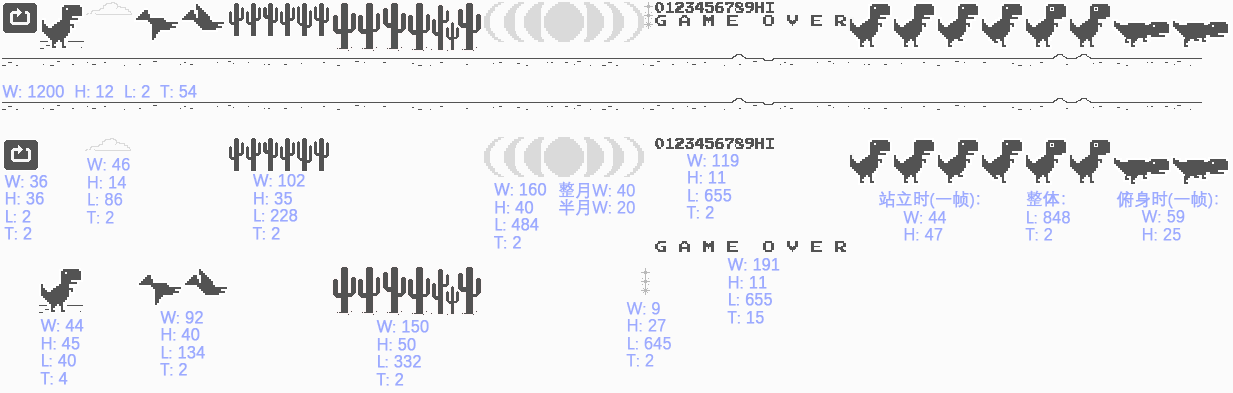
<style>
.page{position:relative;width:1233px;height:393px;background:#fbfbfb}
.page>*{position:absolute;margin:0}
.t1{font:16.7px "DengXian-Regular";color:#9caaff;font-weight:bold}
.t2{font:16.7px/17.5px "DengXian-Regular";color:#9caaff;font-weight:bold}
</style>
<div class="page">
<p class="t1" style="left:2px;top:85px;width:195px;height:13px">W: 1200  H: 12  L: 2  T: 54</p>
<p class="t2" style="left:86px;top:158px;width:44px;height:66px">W: 46<br>H: 14<br>L: 86<br>T: 2</p>
<p class="t2" style="left:686px;top:154px;width:53px;height:65px">W: 119<br>H: 11<br>L: 655<br>T: 2</p>
<p class="t2" style="left:252px;top:174px;width:53px;height:66px">W: 102<br>H: 35<br>L: 228<br>T: 2</p>
<p class="t2" style="left:4px;top:175px;width:44px;height:65px">W: 36<br>H: 36<br>L: 2<br>T: 2</p>
<p class="t2" style="left:494px;top:183px;width:53px;height:66px">W: 160<br>H: 40<br>L: 484<br>T: 2</p>
<p class="t2" style="left:559px;top:181px;width:76px;height:35px">整月W: 40<br>半月W: 20</p>
<p class="t2" style="left:879px;top:191px;width:101px;height:50px">站立时(一帧)：<br>     W: 44<br>     H: 47</p>
<p class="t2" style="left:1025px;top:190px;width:45px;height:51px">整体：<br>L: 848<br>T: 2</p>
<p class="t2" style="left:1116px;top:191px;width:102px;height:50px">俯身时(一帧)：<br>     W: 59<br>     H: 25</p>
<p class="t2" style="left:727px;top:258px;width:53px;height:66px">W: 191<br>H: 11<br>L: 655<br>T: 15</p>
<p class="t2" style="left:626px;top:302px;width:45px;height:65px">W: 9<br>H: 27<br>L: 645<br>T: 2</p>
<p class="t2" style="left:160px;top:311px;width:45px;height:65px">W: 92<br>H: 40<br>L: 134<br>T: 2</p>
<p class="t2" style="left:40px;top:319px;width:44px;height:66px">W: 44<br>H: 45<br>L: 40<br>T: 4</p>
<p class="t2" style="left:376px;top:320px;width:53px;height:66px">W: 150<br>H: 50<br>L: 332<br>T: 2</p>
</div>
